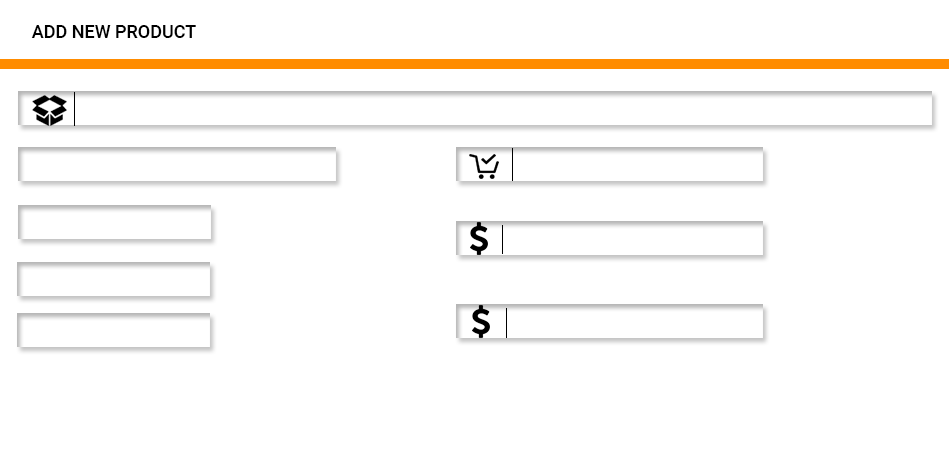
<style>
.page{position:relative;width:950px;height:450px;background:#ffffff}
.page>*{position:absolute;margin:0}
.t1{font:18px "Roboto-Medium";color:#000000}
</style>
<div class="page">
<p class="t1" style="left:31px;top:25px;width:165px;height:13px">ADD NEW PRODUCT</p>
</div>
